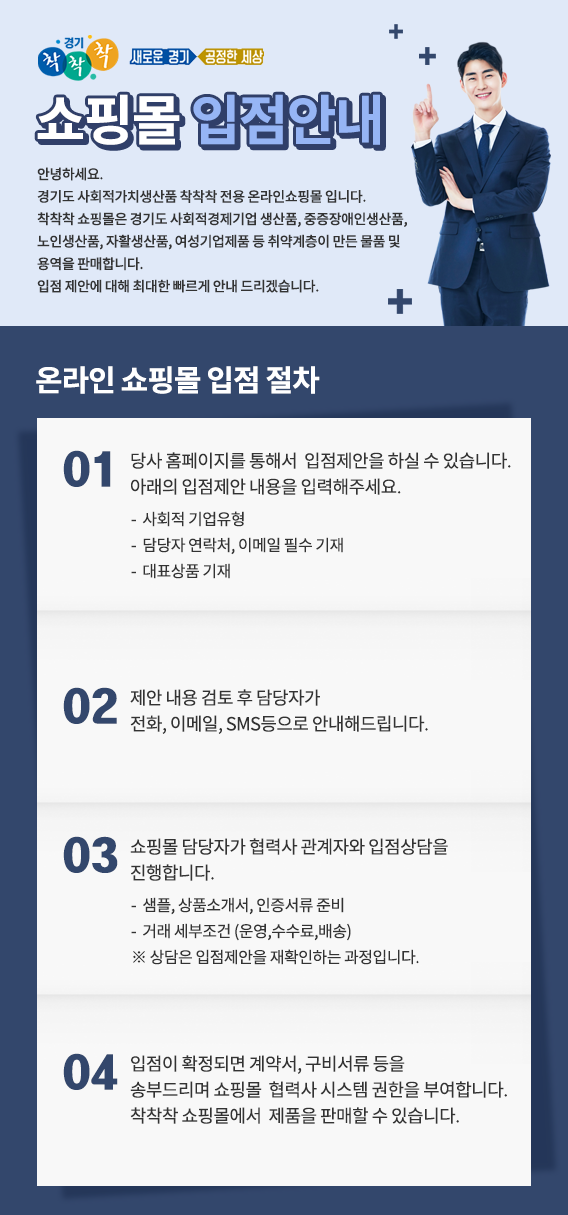
<style>
.page{position:relative;width:568px;height:1215px;background:#f8f8f8}
.page>*{position:absolute;margin:0}
.t1{font:54px "NotoSansCJKkr-Bold";letter-spacing:-0.03em;color:#96b5f5}
.t2{font:54px "NotoSansCJKkr-Bold";letter-spacing:-0.03em;color:#ffffff}
.t3{font:14px/22.4px "NotoSansCJKkr-Medium";letter-spacing:-0.03em;color:#333333}
.t4{font:29.6px "NotoSansCJKkr-Bold";letter-spacing:-0.03em;color:#ffffff}
.t5{font:40.3px "HeadlineR-HM";letter-spacing:-0.03em;color:#33476c}
.t6{font:18px/26px "NotoSansCJKkr-Regular";letter-spacing:-0.03em;color:#333333}
.t7{font:16px/26px "NotoSansCJKkr-Regular";letter-spacing:-0.03em;color:#333333}
</style>
<div class="page">
<p class="t1" style="left:37px;top:94px;width:343px;height:51px"><span class="t2">쇼핑몰 </span>입점안내</p>
<p class="t3" style="left:37px;top:167px;width:370px;height:126px">안녕하세요. <br>경기도 사회적가치생산품 착착착 전용 온라인쇼핑몰 입니다.<br>착착착 쇼핑몰은 경기도 사회적경제기업 생산품, 중증장애인생산품, 노인생산품, 자활생산품, 여성기업제품 등 취약계층이 만든 물품 및 용역을 판매합니다. <br>입점 제안에 대해 최대한 빠르게 안내 드리겠습니다.</p>
<p class="t4" style="left:36px;top:366px;width:284px;height:28px">온라인 쇼핑몰 입점 절차</p>
<p class="t5" style="left:63px;top:450px;width:48px;height:37px">01</p>
<p class="t6" style="left:131px;top:452px;width:380px;height:43px">당사 홈페이지를 통해서  입점제안을 하실 수 있습니다.<br>아래의 입점제안 내용을 입력해주세요.</p>
<p class="t7" style="left:131px;top:511px;width:212px;height:68px">-  사회적 기업유형<br>-  담당자 연락처, 이메일 필수 기재<br>-  대표상품 기재</p>
<p class="t5" style="left:63px;top:687px;width:54px;height:37px">02</p>
<p class="t6" style="left:130px;top:689px;width:298px;height:45px">제안 내용 검토 후 담당자가 <br>전화, 이메일, SMS등으로 안내해드립니다.</p>
<p class="t5" style="left:63px;top:836px;width:55px;height:37px">03</p>
<p class="t6" style="left:130px;top:838px;width:318px;height:43px">쇼핑몰 담당자가 협력사 관계자와 입점상담을<br>진행합니다.</p>
<p class="t7" style="left:131px;top:897px;width:288px;height:68px">-  샘플, 상품소개서, 인증서류 준비<br>-  거래 세부조건 (운영,수수료,배송)<br>※ 상담은 입점제안을 재확인하는 과정입니다.</p>
<p class="t5" style="left:63px;top:1053px;width:55px;height:37px">04</p>
<p class="t6" style="left:130px;top:1055px;width:377px;height:69px">입점이 확정되면 계약서, 구비서류 등을<br>송부드리며 쇼핑몰  협력사 시스템 권한을 부여합니다.<br>착착착 쇼핑몰에서  제품을 판매할 수 있습니다.</p>
</div>
